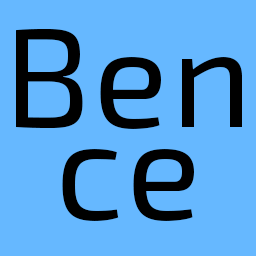
<style>
.page{position:relative;width:256px;height:256px;background:#66b8ff}
.page>*{position:absolute;margin:0}
.t1{font:140px "Exo2-Regular";letter-spacing:0.02em;color:#000000}
</style>
<div class="page">
<p class="t1" style="left:16px;top:29px;width:226px;height:192px">Bence</p>
</div>
